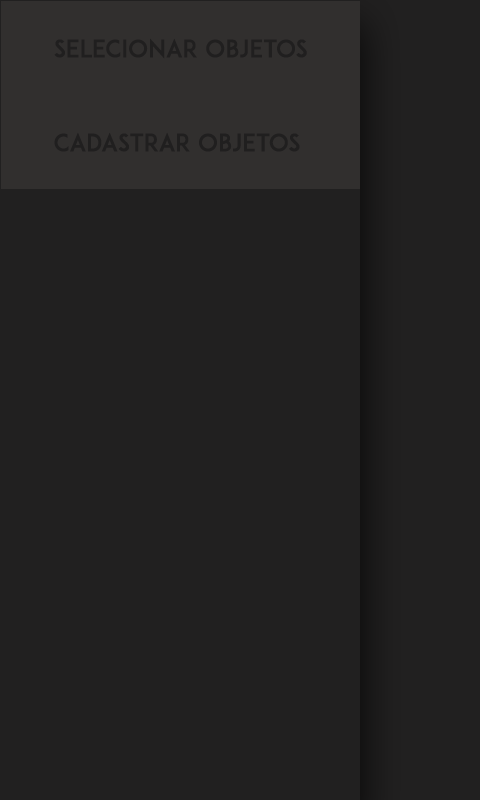
<style>
.page{position:relative;width:480px;height:800px;background:#212020}
.page>*{position:absolute;margin:0}
.t1{font:24px "ADAM.CGPRO";color:#201f1f}
</style>
<div class="page">
<p class="t1" style="left:54px;top:38px;width:253px;height:21px">selecionar objetos</p>
<p class="t1" style="left:54px;top:132px;width:246px;height:20px">CADASTRAR objetos</p>
</div>
